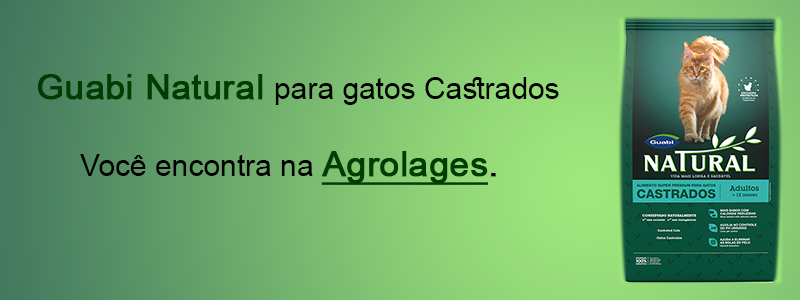
<style>
.page{position:relative;width:800px;height:300px}
.page>*{position:absolute;margin:0}
.t1{font:30px "ArialMT";color:#000000}
.t2{font:35px "ArialMT";color:#003d00;font-weight:bold}
.t3{font:35px "ArialMT";color:#003d00;font-weight:bold;text-decoration:underline}
.t4{font:35px "ArialMT";color:#000000;font-weight:bold}
</style>
<div class="page">
<p class="t1" style="left:37px;top:74px;width:522px;height:31px"><span class="t2">Guabi Natural </span>para gatos Castrados</p>
<p class="t1" style="left:80px;top:151px;width:416px;height:34px">Você encontra na <span class="t3">Agrolages</span><span class="t4">.</span></p>
</div>
